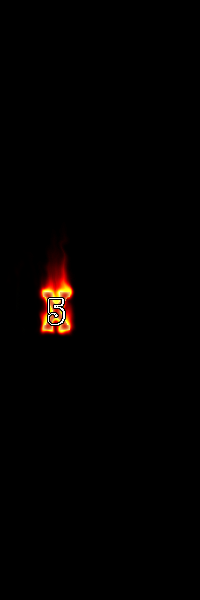
<style>
.page{position:relative;width:200px;height:600px;background:#000000}
.page>*{position:absolute;margin:0}
.t1{font:32px "Coaster-Shadow";letter-spacing:0.025em;color:#ffffff;font-variant:small-caps}
</style>
<div class="page">
<p class="t1" style="left:48px;top:298px;width:17px;height:27px">5</p>
</div>
